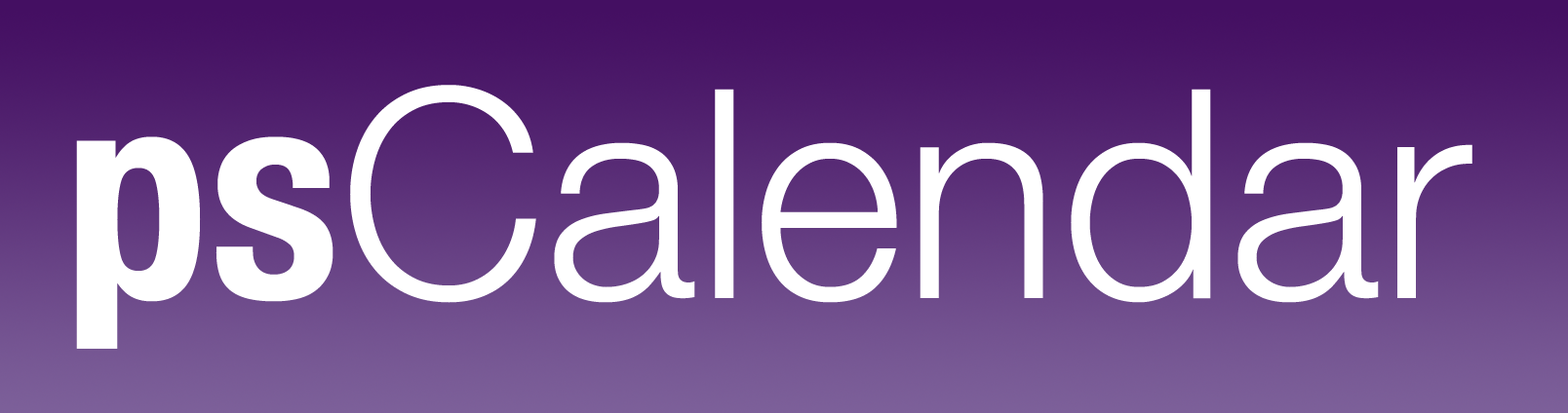
<style>
.page{position:relative;width:1568px;height:413px}
.page>*{position:absolute;margin:0}
.t1{font:292.5px "HelveticaNeue-Light";color:#ffffff}
.t2{font:292.5px "HelveticaNeue-CondensedBold";color:#ffffff}
</style>
<div class="page">
<p class="t1" style="left:76px;top:85px;width:1396px;height:264px"><span class="t2">ps</span>Calendar</p>
</div>
